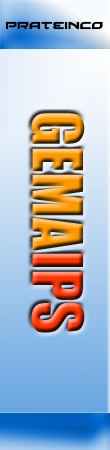
<style>
.page{position:relative;width:110px;height:450px}
.page>*{position:absolute;margin:0}
.t1{font:64px "Impact"}
</style>
<div class="page">
<p class="t1" style="left:31px;top:113px;width:54px;height:220px;rotate:90deg">GEMAIPS</p>
</div>
